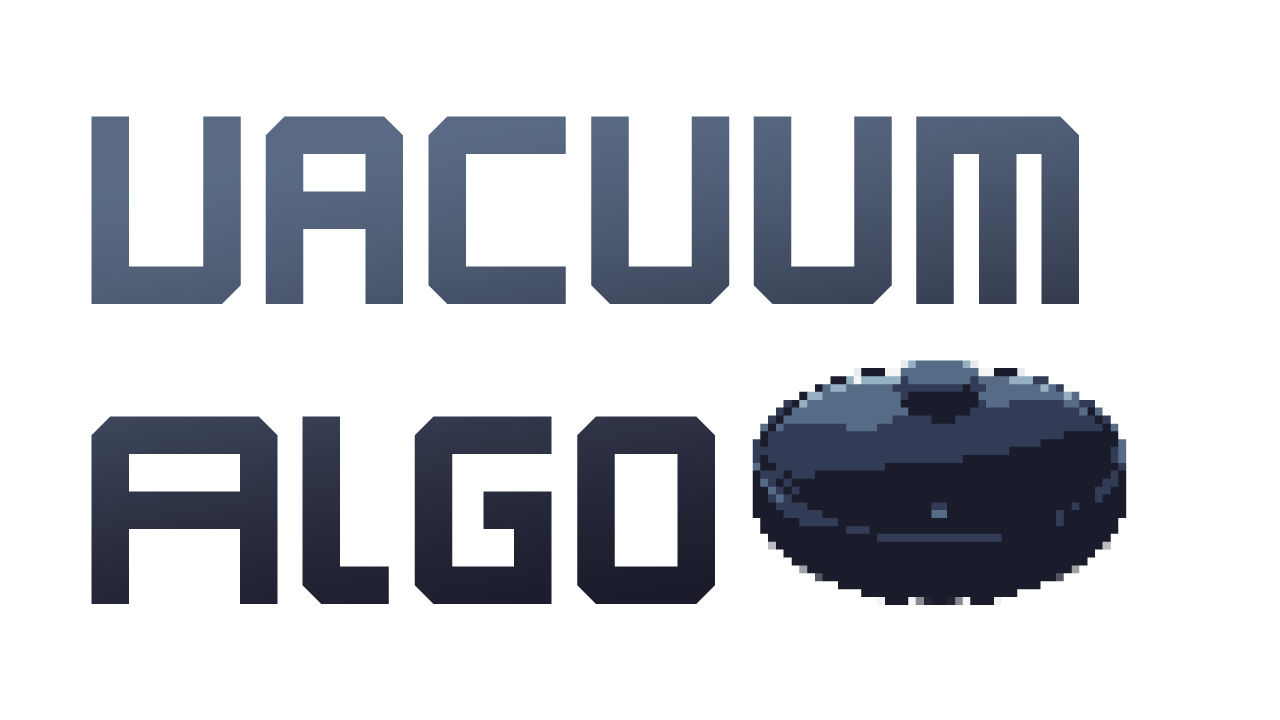
<style>
.page{position:relative;width:1280px;height:720px;background:#ffffff}
.page>*{position:absolute;margin:0}
.t1{font:250px "Karnivore"}
</style>
<div class="page">
<p class="t1" style="left:91px;top:116px;width:988px;height:488px">Vacuum<br>Algo</p>
</div>
